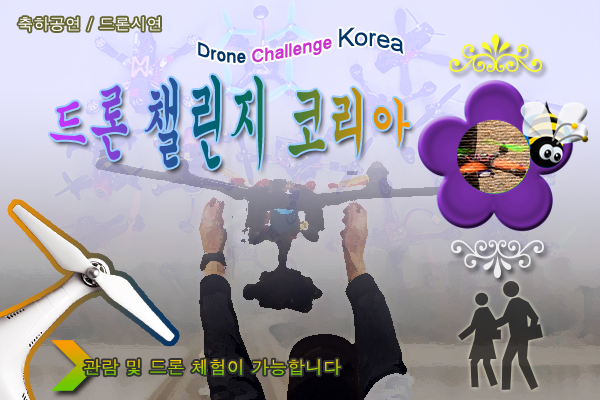
<style>
.page{position:relative;width:600px;height:400px}
.page>*{position:absolute;margin:0}
.t1{font:16px "Dotum";color:#ffffff}
.t2{font:18px "ArialMT";color:#cc33cc}
.t3{font:18px "ArialMT";color:#003366}
.t4{font:25px "ArialMT";color:#003366}
.t5{font:42px "Gungsuh"}
.t6{font:18px "Dotum"}
</style>
<div class="page">
<p class="t1" style="left:18px;top:17px;width:143px;height:15px">축하공연 / 드론시연</p>
<p class="t2" style="left:198px;top:27px;width:206px;height:36px"><span class="t3">Drone </span>Challenge <span class="t4">Korea</span></p>
<p class="t5" style="left:50px;top:74px;width:360px;height:96px;text-align:center">드론 챌린지 코리아</p>
<p class="t6" style="left:84px;top:359px;width:257px;height:17px">관람 및 드론 체험이 가능합니다</p>
</div>
